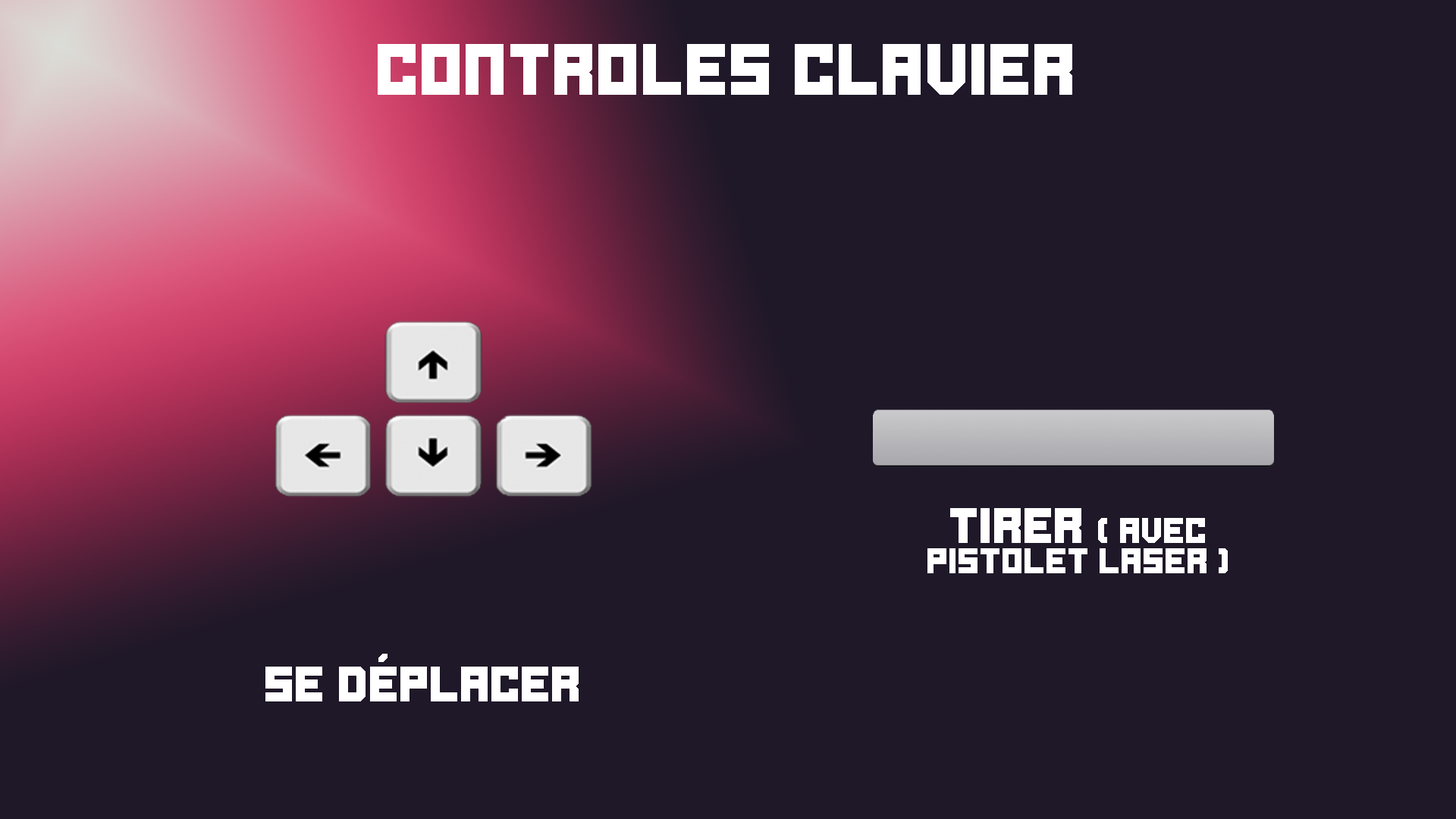
<style>
.page{position:relative;width:1456px;height:819px;background:#1f1828}
.page>*{position:absolute;margin:0}
.t1{font:50.6px "Ode-to-Idle-Gaming";color:#ffffff}
.t2{font:25.3px "Ode-to-Idle-Gaming";color:#ffffff}
.t3{font:34.8px "Ode-to-Idle-Gaming";color:#ffffff}
</style>
<div class="page">
<p class="t1" style="left:378px;top:44px;width:694px;height:51px">Controles clavier</p>
<p class="t2" style="left:927px;top:508px;width:301px;height:65px;text-align:center"><span class="t3">Tirer </span>( avec pistolet laser )</p>
<p class="t3" style="left:265px;top:654px;width:314px;height:47px">Se déplacer</p>
</div>
